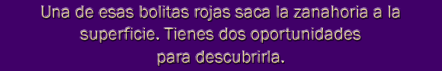
<style>
.page{position:relative;width:442px;height:71px;background:#400068}
.page>*{position:absolute;margin:0}
.t1{font:18px/22.2px "FranklinGothic-Book";color:#d4c088}
</style>
<div class="page">
<p class="t1" style="left:42px;top:6px;width:358px;height:60px;text-align:center">Una de esas bolitas rojas saca la zanahoria a la <br>superficie. Tienes dos oportunidades<br>para descubrirla.</p>
</div>
